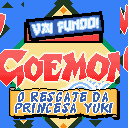
<style>
.page{position:relative;width:128px;height:128px;background:#3880f8}
.page>*{position:absolute;margin:0}
.t1{font:14px "GangofThree";letter-spacing:0.04em;color:#f8f8f8;scale:0.91 1}
.t2{font:15px "Katana";letter-spacing:0.04em;color:#3860b0}
</style>
<div class="page">
<p class="t1" style="left:32px;top:18px;width:66px;height:17px;rotate:-6deg">Vai Fundo!</p>
<p class="t2" style="left:18px;top:92px;width:90px;height:10px">O Resgate da</p>
<p class="t2" style="left:15px;top:103px;width:98px;height:10px">Princesa Yuki</p>
</div>
